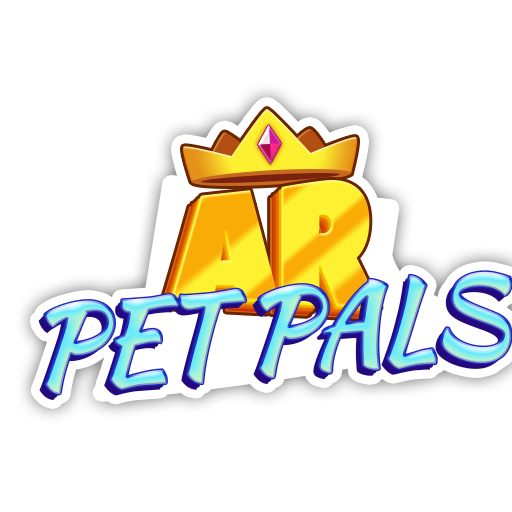
<style>
.page{position:relative;width:512px;height:512px;background:#ffffff}
.page>*{position:absolute;margin:0}
.t1{font:164.3px "PeaceSans";letter-spacing:-0.05em;scale:0.87 1}
.t2{font:108.3px "KaushanScript-Regular";letter-spacing:-0.05em;font-weight:bold}
</style>
<div class="page">
<p class="t1" style="left:172px;top:180px;width:209px;height:129px">AR</p>
<p class="t2" style="left:44px;top:271px;width:468px;height:124px;rotate:-4deg">PET PALS</p>
</div>
